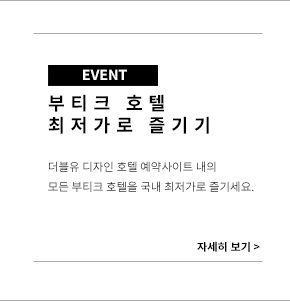
<style>
.page{position:relative;width:290px;height:301px;background:#ffffff}
.page>*{position:absolute;margin:0}
.t1{font:13.9px "NotoSansCJKkr-Bold";color:#ffffff}
.t2{font:18.2px/21.7px "NotoSansCJKkr-Bold";letter-spacing:0.3em;color:#000000}
.t3{font:11.3px "NotoSansCJKkr-DemiLight"}
.t4{font:11px "NotoSansCJKkr-Bold";color:#000000}
</style>
<div class="page">
<p class="t1" style="left:83px;top:69px;width:44px;height:11px">EVENT</p>
<p class="t2" style="left:48px;top:94px;width:161px;height:40px">부티크 호텔<br>최저가로 즐기기</p>
<p class="t3" style="left:48px;top:161px;width:206px;height:31px">더블유 디자인 호텔 예약사이트 내의<br>모든 부티크 호텔을 국내 최저가로 즐기세요.</p>
<p class="t4" style="left:197px;top:241px;width:63px;height:11px">자세히 보기 &gt;</p>
</div>
